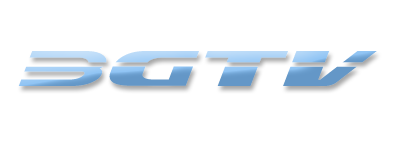
<style>
.page{position:relative;width:400px;height:150px;background:#ffffff}
.page>*{position:absolute;margin:0}
.t1{font:57.1px "Excelerate"}
</style>
<div class="page">
<p class="t1" style="left:18px;top:51px;width:359px;height:35px">3GTV</p>
</div>
